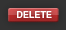
<style>
.page{position:relative;width:66px;height:30px}
.page>*{position:absolute;margin:0}
.t1{font:9px "Helvetica-Bold";color:#ffffff;text-transform:uppercase}
</style>
<div class="page">
<p class="t1" style="left:17px;top:11px;width:35px;height:7px">DELETE</p>
</div>
